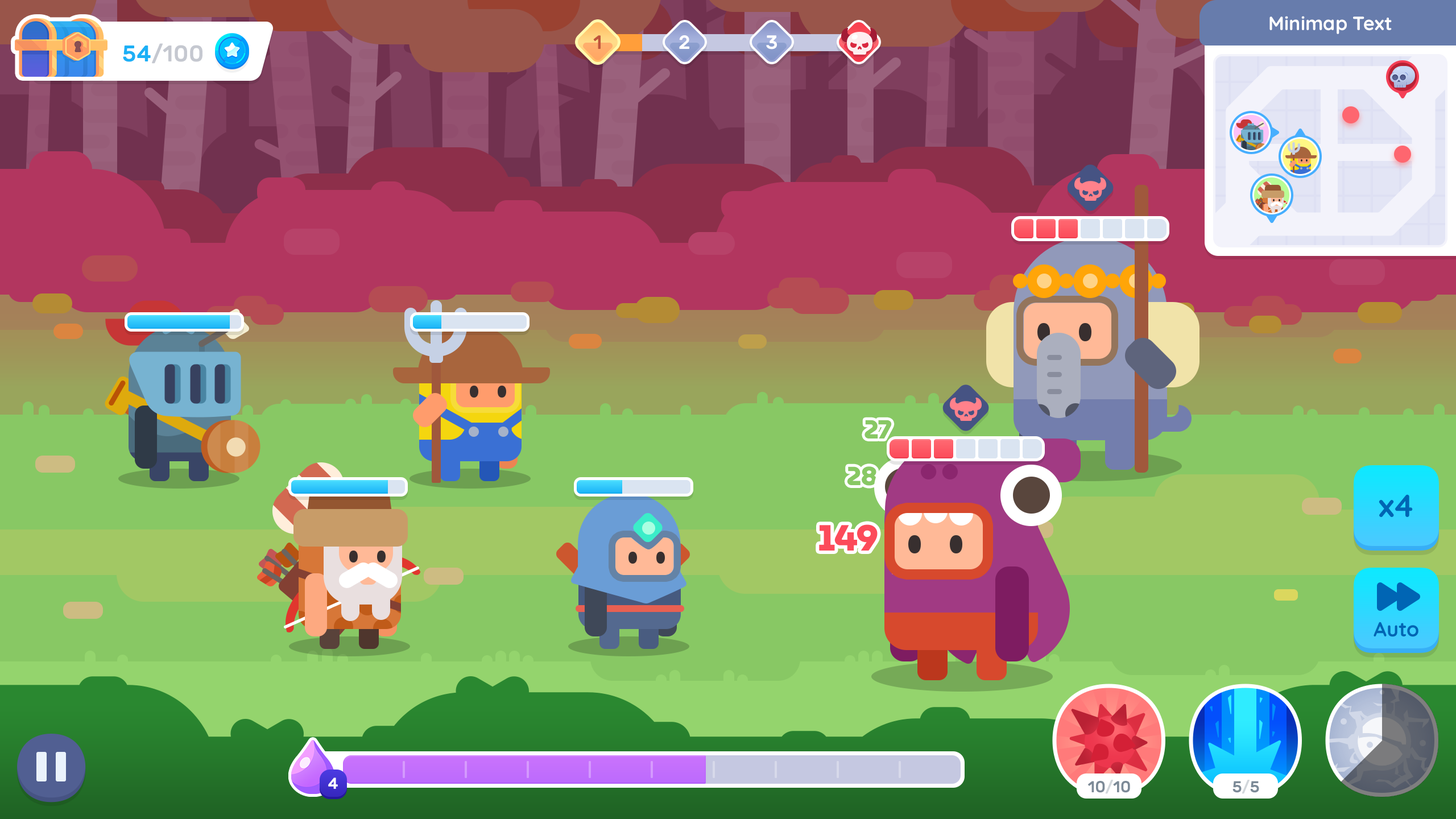
<style>
.page{position:relative;width:1456px;height:819px}
.page>*{position:absolute;margin:0}
.t1{font:19.3px "Quicksand-Bold";color:#ffffff}
.t2{font:19.3px "Rubik-Medium";letter-spacing:-0.025em;color:#c0553c}
.t3{font:19.3px "Rubik-Medium";letter-spacing:-0.025em;color:#ffffff}
.t4{font:22.7px "Rubik-Medium";color:#c5c8d0}
.t5{font:22.7px "Rubik-Medium";color:#1cb0f6}
.t6{font:26.2px "MuseoModerno-ExtraBold";letter-spacing:-0.025em;color:#88c864}
.t7{font:31.8px "Quicksand-Bold";color:#0065b4}
.t8{font:36.4px "MuseoModerno-ExtraBold";letter-spacing:-0.025em;color:#fc4b5a}
.t9{font:20.5px "Quicksand-Bold";color:#0065b4}
.t10{font:15.9px "Rubik-Medium";color:#ffffff}
.t11{font:15.9px "Rubik-Medium";color:#7c8a97;text-transform:uppercase}
.t12{font:15.9px "Rubik-Medium";color:#d2d7db;text-transform:uppercase}
</style>
<div class="page">
<p class="t1" style="left:1269px;top:16px;width:123px;height:18px">Minimap Text</p>
<p class="t2" style="left:593px;top:35px;width:8px;height:14px">1</p>
<p class="t3" style="left:679px;top:35px;width:10px;height:14px">2</p>
<p class="t3" style="left:766px;top:35px;width:11px;height:14px">3</p>
<p class="t4" style="left:123px;top:43px;width:79px;height:21px"><span class="t5">54</span>/100</p>
<p class="t6" style="left:864px;top:420px;width:28px;height:19px">27</p>
<p class="t6" style="left:847px;top:466px;width:30px;height:20px">28</p>
<p class="t7" style="left:1379px;top:494px;width:34px;height:23px">x4</p>
<p class="t8" style="left:819px;top:524px;width:59px;height:27px">149</p>
<p class="t9" style="left:1374px;top:622px;width:44px;height:15px">Auto</p>
<p class="t10" style="left:328px;top:777px;width:10px;height:12px">4</p>
<p class="t11" style="left:1088px;top:780px;width:42px;height:14px">10<span class="t12">/</span>10</p>
<p class="t11" style="left:1232px;top:780px;width:27px;height:14px">5<span class="t12">/</span>5</p>
</div>
